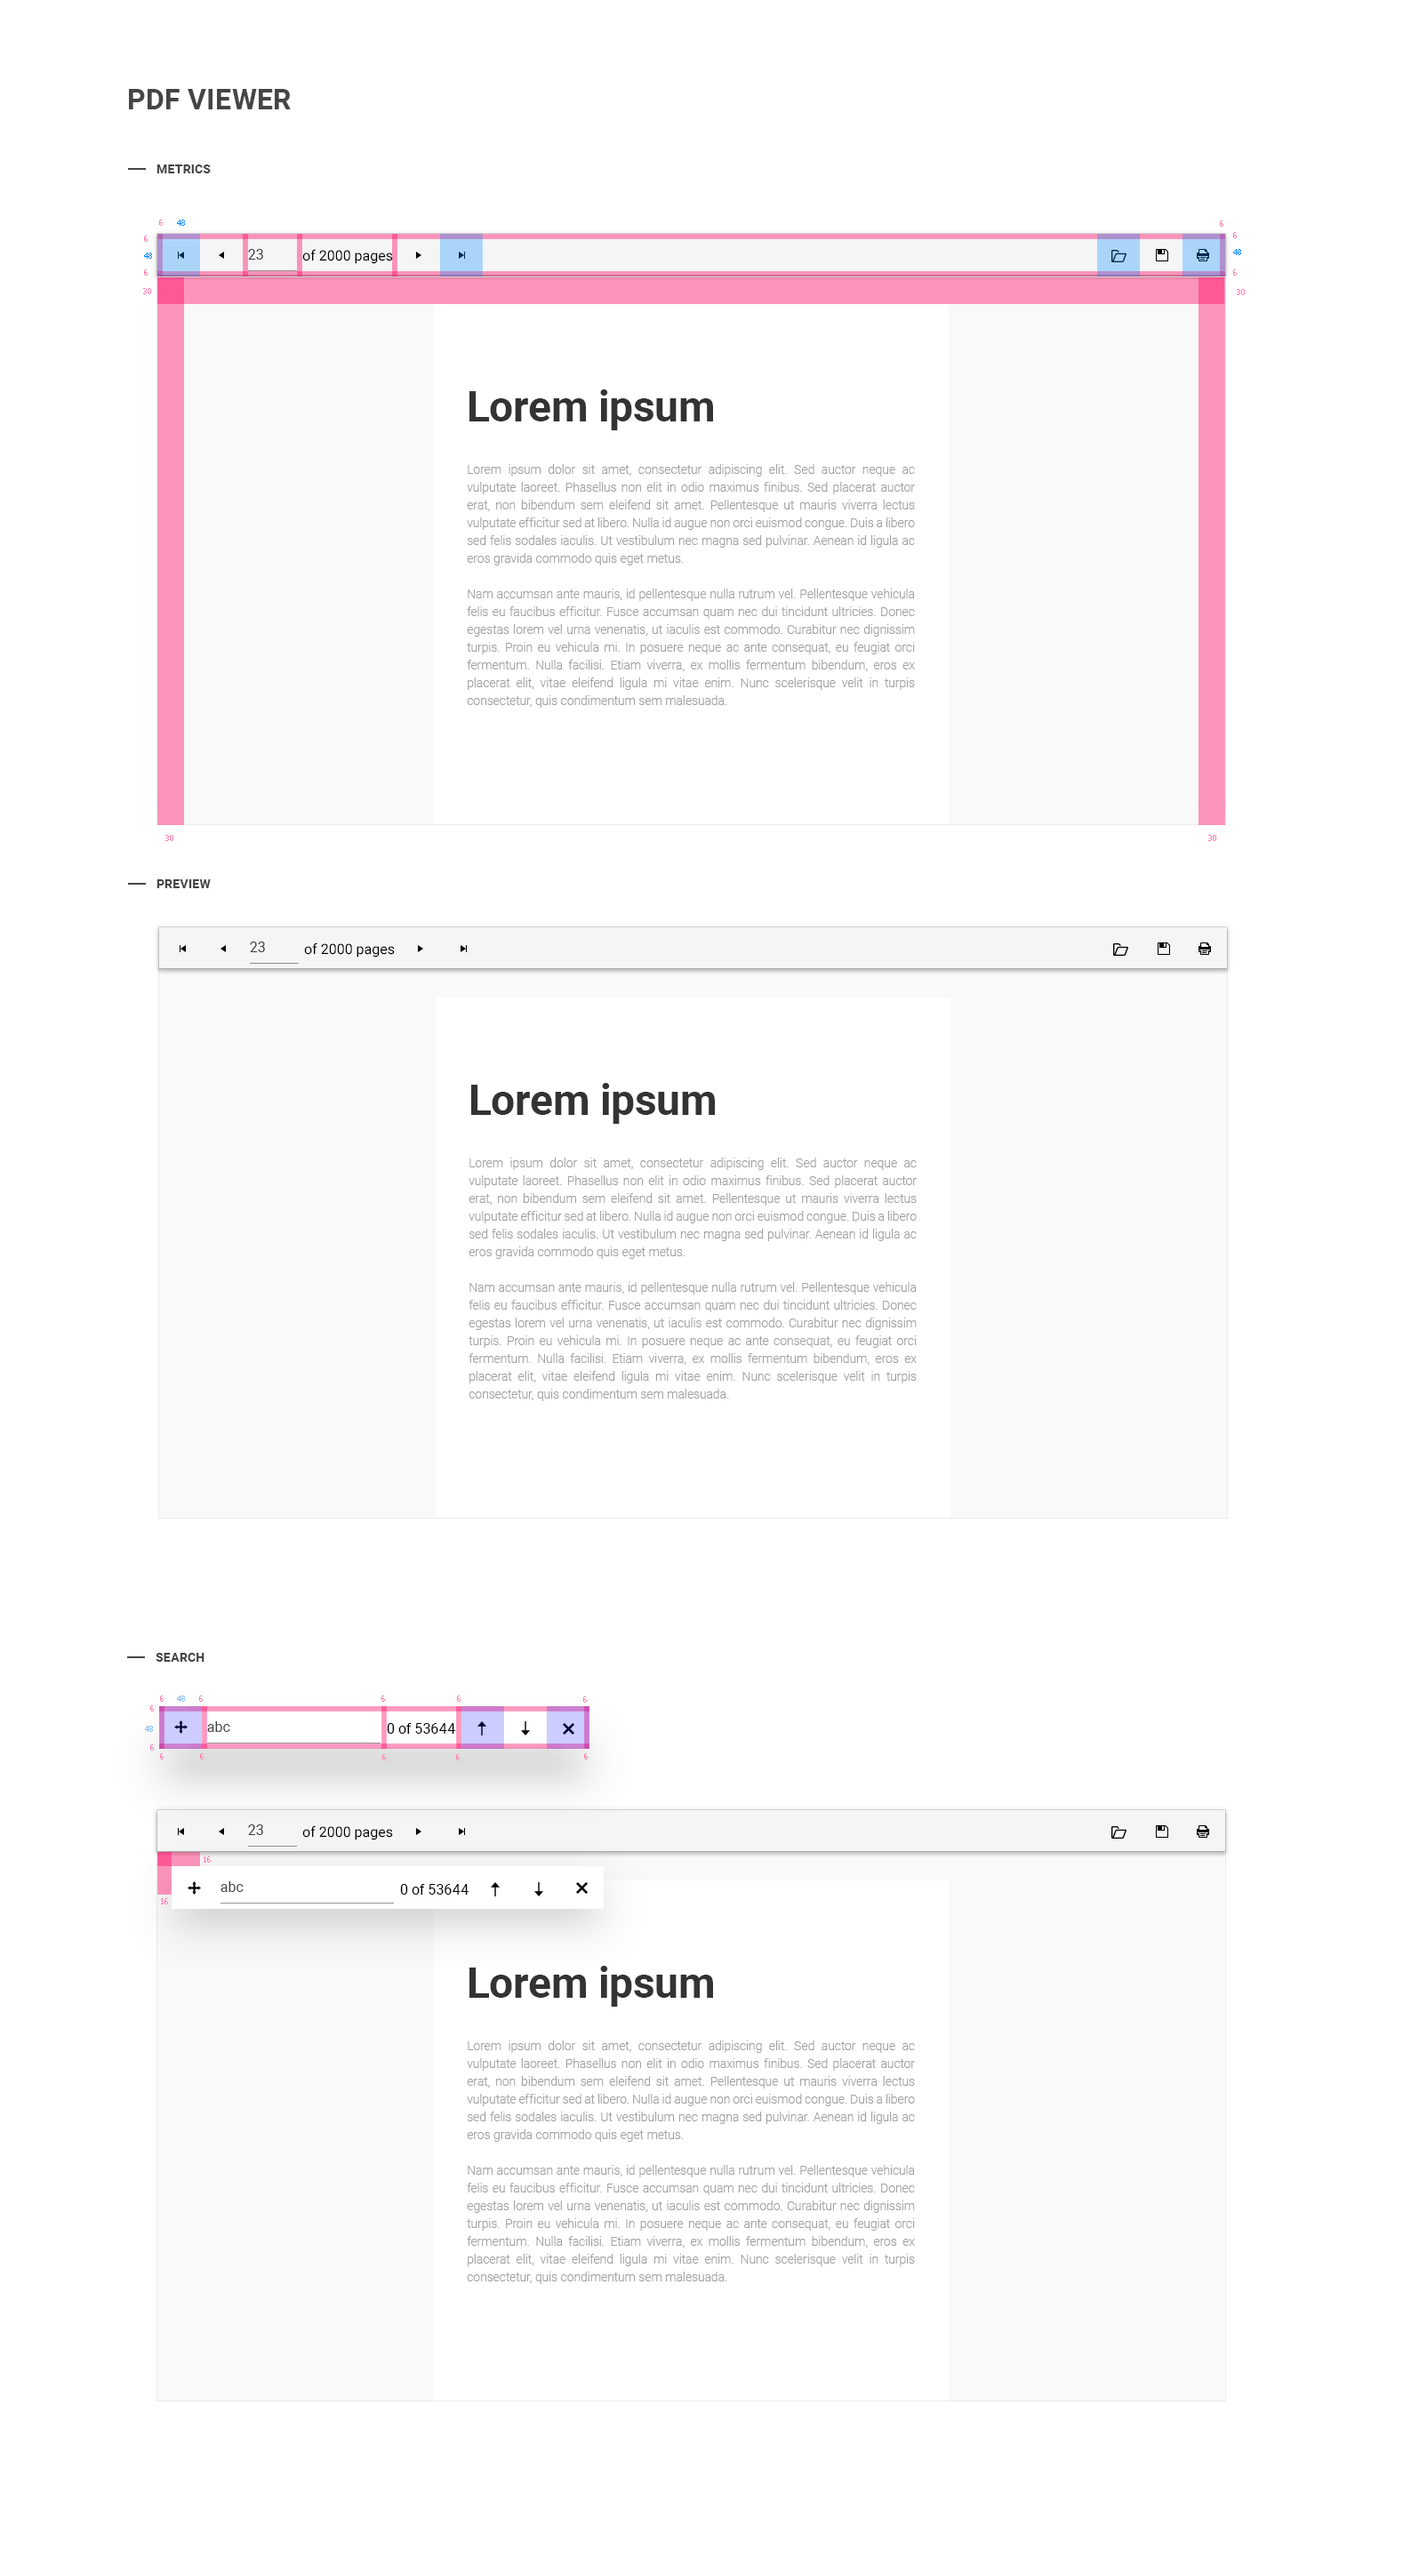
<style>
.page{position:relative;width:1427px;height:2549px;background:#ffffff}
.page>*{position:absolute;margin:0}
.t1{font:28.5px "Roboto-Bold";letter-spacing:0.01em;color:#454545;text-transform:uppercase}
.t2{font:12.4px "Roboto-Bold";letter-spacing:0.01em;color:#454545;text-transform:uppercase}
.t3{font:8px "Tahoma";color:#ff7cae}
.t4{font:8px "Tahoma";color:#008aff}
.t5{font:14.2px "Roboto-Regular";color:#3d3d3d}
.t6{font:14.2px "Roboto-Regular";color:#010101}
.t7{font:42.7px "Roboto-Bold";color:#333333}
.t8{font:12.4px/17.8px "Roboto-Light";color:#a1a1a1}
.t9{font:8px "Tahoma";color:#7cbaff}
.t10{font:14.2px "Roboto-Regular";color:#404040}
.t11{font:14.2px "Roboto-Regular";color:#000000}
</style>
<div class="page">
<p class="t1" style="left:129px;top:89px;width:162px;height:20px">PDF VIEWER</p>
<p class="t2" style="left:156px;top:164px;width:55px;height:9px">Metrics</p>
<p class="t3" style="left:159px;top:220px;width:4px;height:6px">6</p>
<p class="t4" style="left:177px;top:220px;width:8px;height:6px">48</p>
<p class="t3" style="left:1220px;top:221px;width:4px;height:6px">6</p>
<p class="t3" style="left:1233px;top:232px;width:4px;height:6px">6</p>
<p class="t3" style="left:144px;top:236px;width:4px;height:6px">6</p>
<p class="t4" style="left:144px;top:253px;width:8px;height:6px">48</p>
<p class="t5" style="left:248px;top:249px;width:15px;height:11px">23</p>
<p class="t6" style="left:302px;top:249px;width:91px;height:15px">of 2000 pages</p>
<p class="t4" style="left:1233px;top:249px;width:8px;height:6px">48</p>
<p class="t3" style="left:144px;top:269px;width:4px;height:7px">6</p>
<p class="t3" style="left:1233px;top:269px;width:4px;height:7px">6</p>
<p class="t3" style="left:143px;top:288px;width:8px;height:6px">30</p>
<p class="t3" style="left:1237px;top:289px;width:8px;height:6px">30</p>
<p class="t7" style="left:469px;top:389px;width:244px;height:41px">Lorem ipsum</p>
<p class="t8" style="left:467px;top:464px;width:448px;height:244px;text-align:justify">Lorem ipsum dolor sit amet, consectetur adipiscing elit. Sed auctor neque ac vulputate laoreet. Phasellus non elit in odio maximus finibus. Sed placerat auctor erat, non bibendum sem eleifend sit amet. Pellentesque ut mauris viverra lectus vulputate efficitur sed at libero. Nulla id augue non orci euismod congue. Duis a libero sed felis sodales iaculis. Ut vestibulum nec magna sed pulvinar. Aenean id ligula ac eros gravida commodo quis eget metus.<br><br>Nam accumsan ante mauris, id pellentesque nulla rutrum vel. Pellentesque vehicula felis eu faucibus efficitur. Fusce accumsan quam nec dui tincidunt ultricies. Donec egestas lorem vel urna venenatis, ut iaculis est commodo. Curabitur nec dignissim turpis. Proin eu vehicula mi. In posuere neque ac ante consequat, eu feugiat orci fermentum. Nulla facilisi. Etiam viverra, ex mollis fermentum bibendum, eros ex placerat elit, vitae eleifend ligula mi vitae enim. Nunc scelerisque velit in turpis consectetur, quis condimentum sem malesuada.</p>
<p class="t3" style="left:165px;top:835px;width:8px;height:6px">30</p>
<p class="t3" style="left:1208px;top:835px;width:8px;height:6px">30</p>
<p class="t2" style="left:156px;top:879px;width:55px;height:9px">preview</p>
<p class="t5" style="left:250px;top:942px;width:15px;height:10px">23</p>
<p class="t6" style="left:304px;top:943px;width:91px;height:15px">of 2000 pages</p>
<p class="t7" style="left:471px;top:1083px;width:244px;height:41px">Lorem ipsum</p>
<p class="t8" style="left:469px;top:1158px;width:448px;height:243px;text-align:justify">Lorem ipsum dolor sit amet, consectetur adipiscing elit. Sed auctor neque ac vulputate laoreet. Phasellus non elit in odio maximus finibus. Sed placerat auctor erat, non bibendum sem eleifend sit amet. Pellentesque ut mauris viverra lectus vulputate efficitur sed at libero. Nulla id augue non orci euismod congue. Duis a libero sed felis sodales iaculis. Ut vestibulum nec magna sed pulvinar. Aenean id ligula ac eros gravida commodo quis eget metus.<br><br>Nam accumsan ante mauris, id pellentesque nulla rutrum vel. Pellentesque vehicula felis eu faucibus efficitur. Fusce accumsan quam nec dui tincidunt ultricies. Donec egestas lorem vel urna venenatis, ut iaculis est commodo. Curabitur nec dignissim turpis. Proin eu vehicula mi. In posuere neque ac ante consequat, eu feugiat orci fermentum. Nulla facilisi. Etiam viverra, ex mollis fermentum bibendum, eros ex placerat elit, vitae eleifend ligula mi vitae enim. Nunc scelerisque velit in turpis consectetur, quis condimentum sem malesuada.</p>
<p class="t2" style="left:156px;top:1653px;width:49px;height:9px">search</p>
<p class="t3" style="left:160px;top:1696px;width:4px;height:6px">6</p>
<p class="t9" style="left:177px;top:1696px;width:8px;height:6px">48</p>
<p class="t3" style="left:199px;top:1696px;width:4px;height:6px">6</p>
<p class="t3" style="left:381px;top:1696px;width:4px;height:6px">6</p>
<p class="t3" style="left:457px;top:1696px;width:4px;height:6px">6</p>
<p class="t3" style="left:583px;top:1697px;width:4px;height:6px">6</p>
<p class="t3" style="left:150px;top:1705px;width:4px;height:7px">6</p>
<p class="t10" style="left:207px;top:1721px;width:23px;height:11px">abc</p>
<p class="t9" style="left:145px;top:1726px;width:8px;height:6px">48</p>
<p class="t11" style="left:387px;top:1723px;width:68px;height:11px">0 of 53644</p>
<p class="t3" style="left:150px;top:1745px;width:4px;height:6px">6</p>
<p class="t3" style="left:160px;top:1753px;width:4px;height:7px">6</p>
<p class="t3" style="left:200px;top:1753px;width:4px;height:7px">6</p>
<p class="t3" style="left:382px;top:1754px;width:4px;height:7px">6</p>
<p class="t3" style="left:456px;top:1754px;width:4px;height:7px">6</p>
<p class="t3" style="left:584px;top:1753px;width:4px;height:7px">6</p>
<p class="t5" style="left:248px;top:1825px;width:15px;height:10px">23</p>
<p class="t6" style="left:302px;top:1825px;width:91px;height:16px">of 2000 pages</p>
<p class="t3" style="left:204px;top:1857px;width:7px;height:6px">16</p>
<p class="t10" style="left:221px;top:1881px;width:23px;height:11px">abc</p>
<p class="t11" style="left:400px;top:1884px;width:69px;height:11px">0 of 53644</p>
<p class="t3" style="left:161px;top:1898px;width:7px;height:7px">16</p>
<p class="t7" style="left:469px;top:1966px;width:244px;height:41px">Lorem ipsum</p>
<p class="t8" style="left:467px;top:2041px;width:448px;height:243px;text-align:justify">Lorem ipsum dolor sit amet, consectetur adipiscing elit. Sed auctor neque ac vulputate laoreet. Phasellus non elit in odio maximus finibus. Sed placerat auctor erat, non bibendum sem eleifend sit amet. Pellentesque ut mauris viverra lectus vulputate efficitur sed at libero. Nulla id augue non orci euismod congue. Duis a libero sed felis sodales iaculis. Ut vestibulum nec magna sed pulvinar. Aenean id ligula ac eros gravida commodo quis eget metus.<br><br>Nam accumsan ante mauris, id pellentesque nulla rutrum vel. Pellentesque vehicula felis eu faucibus efficitur. Fusce accumsan quam nec dui tincidunt ultricies. Donec egestas lorem vel urna venenatis, ut iaculis est commodo. Curabitur nec dignissim turpis. Proin eu vehicula mi. In posuere neque ac ante consequat, eu feugiat orci fermentum. Nulla facilisi. Etiam viverra, ex mollis fermentum bibendum, eros ex placerat elit, vitae eleifend ligula mi vitae enim. Nunc scelerisque velit in turpis consectetur, quis condimentum sem malesuada.</p>
</div>
